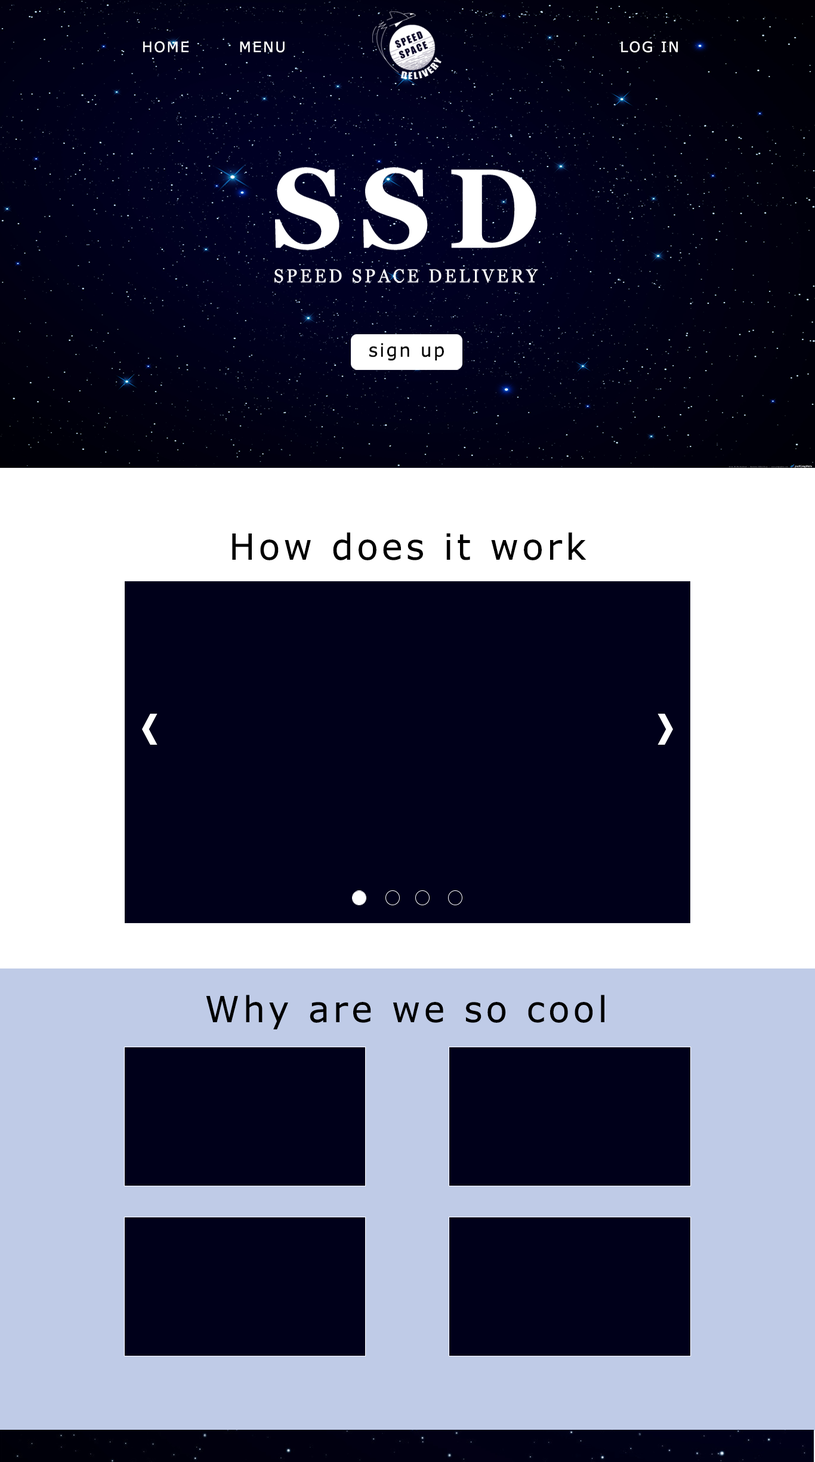
<style>
.page{position:relative;width:815px;height:1462px;background:#00001a}
.page>*{position:absolute;margin:0}
.t1{font:14.3px "Verdana";letter-spacing:0.1em;color:#ffffff}
.t2{font:35.8px "Verdana";letter-spacing:0.1em;color:#000000}
</style>
<div class="page">
<p class="t1" style="left:143px;top:41px;width:46px;height:12px">HOME</p>
<p class="t1" style="left:240px;top:41px;width:45px;height:12px">MENU</p>
<p class="t1" style="left:621px;top:41px;width:57px;height:12px">LOG IN</p>
<p class="t2" style="left:232px;top:532px;width:355px;height:28px">How does it work</p>
<p class="t2" style="left:206px;top:995px;width:399px;height:35px">Why are we so cool</p>
</div>
